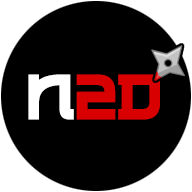
<style>
.page{position:relative;width:192px;height:192px;background:#000000}
.page>*{position:absolute;margin:0}
.t1{font:70.6px "Japanese3017";color:#d80000}
.t2{font:70.6px "Japanese3017";color:#ffffff}
</style>
<div class="page">
<p class="t1" style="left:28px;top:74px;width:132px;height:46px"><span class="t2">N</span>2d</p>
</div>
